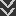
<style>
.page{position:relative;width:16px;height:16px;background:#333333}
.page>*{position:absolute;margin:0}
.t1{font:28.5px "MicrosoftYaHei-Bold";color:#cccccc;scale:0.57 1}
</style>
<div class="page">
<p class="t1" style="left:0px;top:0px;width:15px;height:8px;rotate:-90deg">&lt;</p>
<p class="t1" style="left:0px;top:8px;width:15px;height:8px;rotate:-90deg">&lt;</p>
</div>
